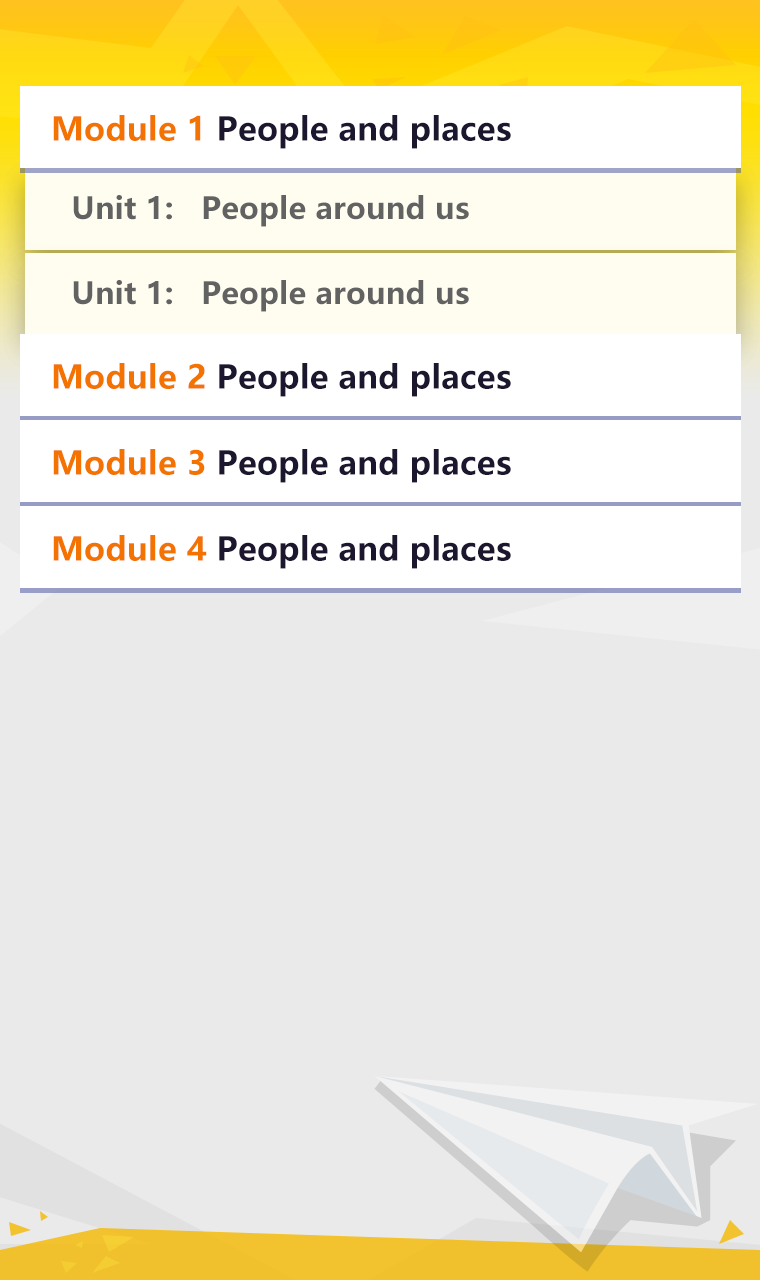
<style>
.page{position:relative;width:760px;height:1280px;background:#eaeaea}
.page>*{position:absolute;margin:0}
.t1{font:32px "MicrosoftYaHei-Bold";letter-spacing:0.01em;color:#1d162f}
.t2{font:32px "MicrosoftYaHei-Bold";letter-spacing:0.01em;color:#f37200}
.t3{font:30px "MicrosoftYaHei-Bold";letter-spacing:0.01em;color:#626262}
</style>
<div class="page">
<p class="t1" style="left:53px;top:115px;width:458px;height:34px"><span class="t2">Module 1</span> People and places</p>
<p class="t3" style="left:73px;top:195px;width:396px;height:32px">Unit 1:   People around us</p>
<p class="t3" style="left:73px;top:280px;width:396px;height:32px">Unit 1:   People around us</p>
<p class="t1" style="left:53px;top:363px;width:458px;height:34px"><span class="t2">Module 2</span> People and places</p>
<p class="t1" style="left:53px;top:449px;width:458px;height:34px"><span class="t2">Module 3</span> People and places</p>
<p class="t1" style="left:53px;top:535px;width:458px;height:34px"><span class="t2">Module 4</span> People and places</p>
</div>
